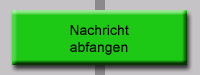
<style>
.page{position:relative;width:200px;height:75px;background:#1ec915}
.page>*{position:absolute;margin:0}
.t1{font:14px "ArialMT";color:#000000}
</style>
<div class="page">
<p class="t1" style="left:70px;top:25px;width:59px;height:30px;text-align:center">Nachricht<br>abfangen</p>
</div>
